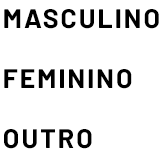
<style>
.page{position:relative;width:168px;height:156px;background:#ffffff}
.page>*{position:absolute;margin:0}
.t1{font:26.7px "Barlow-Bold";letter-spacing:0.075em;color:#000000}
</style>
<div class="page">
<p class="t1" style="left:4px;top:9px;width:155px;height:20px">MASCULINO</p>
<p class="t1" style="left:4px;top:69px;width:128px;height:20px">FEMININO</p>
<p class="t1" style="left:4px;top:129px;width:88px;height:20px">OUTRO</p>
</div>
